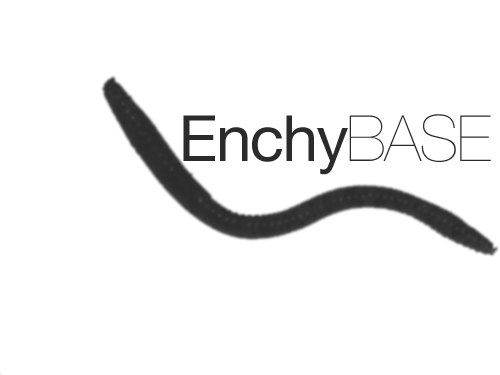
<style>
.page{position:relative;width:500px;height:375px;background:#ffffff}
.page>*{position:absolute;margin:0}
.t1{font:63.9px "HelveticaNeue";letter-spacing:-0.025em;color:#2b2b2b}
.t2{font:63.9px "HelveticaNeue-UltraLight";letter-spacing:-0.025em;color:#2b2b2b}
</style>
<div class="page">
<p class="t1" style="left:183px;top:114px;width:308px;height:61px">Enchy<span class="t2">BASE</span></p>
</div>
